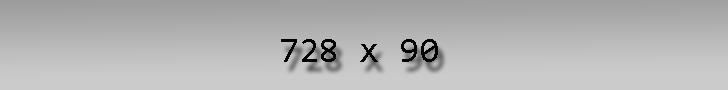
<style>
.page{position:relative;width:728px;height:90px}
.page>*{position:absolute;margin:0}
.t1{font:36px "Consolas";color:#000000}
</style>
<div class="page">
<p class="t1" style="left:281px;top:39px;width:157px;height:23px">728 x 90</p>
</div>
